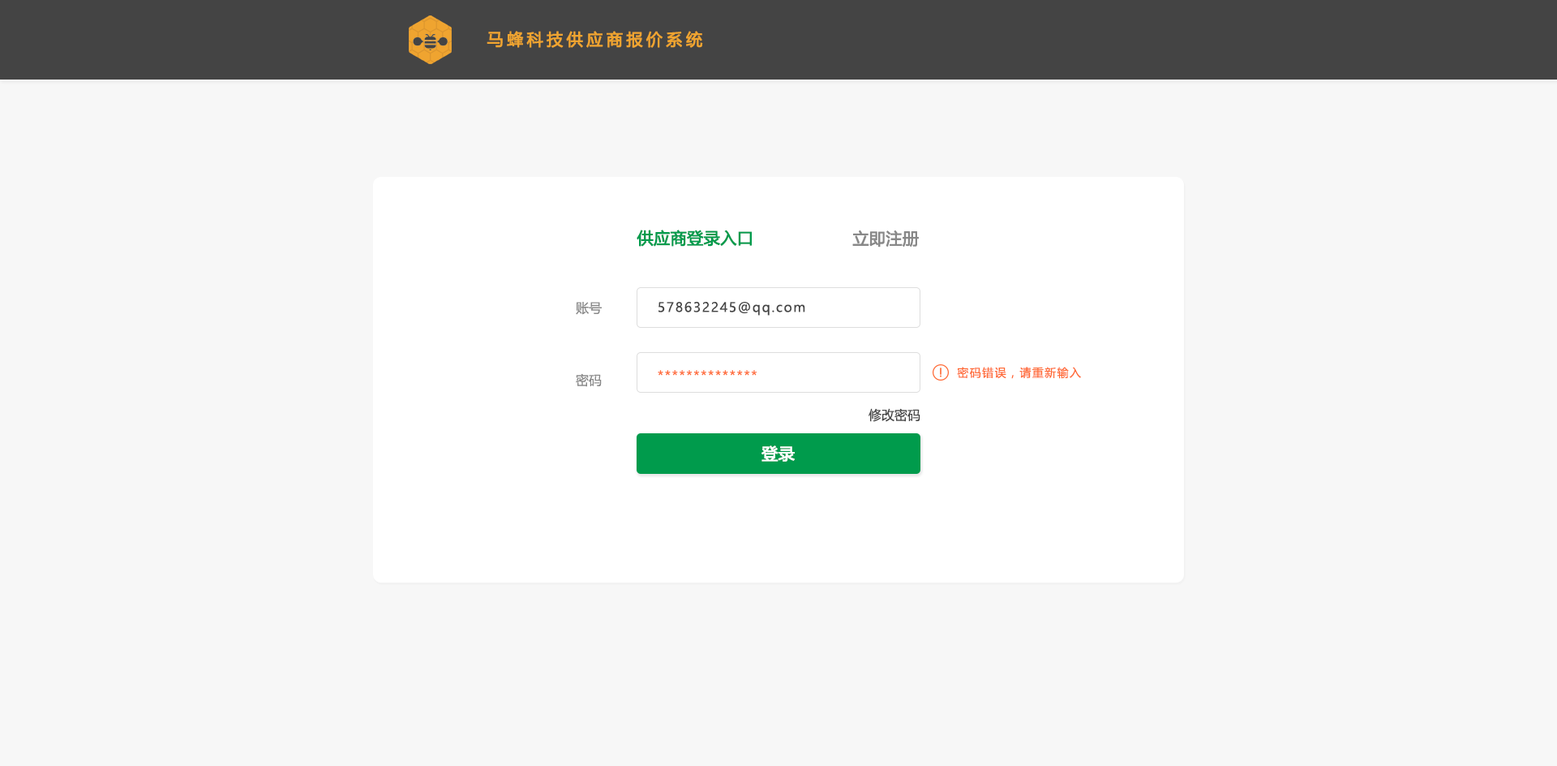
<style>
.page{position:relative;width:1557px;height:766px;background:#f7f7f7}
.page>*{position:absolute;margin:0}
.t1{font:16.2px "MicrosoftYaHei";letter-spacing:0.2em;color:#efa430;font-weight:bold}
.t2{font:16.2px "MicrosoftYaHei";color:#009b4c;font-weight:bold}
.t3{font:16.2px "MicrosoftYaHei";color:#888888;font-weight:bold}
.t4{font:13px "MicrosoftYaHei";color:#888888}
.t5{font:13px "MicrosoftYaHei";letter-spacing:0.1em;color:#444444}
.t6{font:13px "MicrosoftYaHei";letter-spacing:0.1em;color:#ff6934}
.t7{font:11.4px "MicrosoftYaHei";letter-spacing:0.1em;color:#ff6934}
.t8{font:13px "MicrosoftYaHei";color:#444444}
.t9{font:16.2px "MicrosoftYaHei";color:#ffffff;font-weight:bold}
</style>
<div class="page">
<p class="t1" style="left:487px;top:31px;width:216px;height:17px">马蜂科技供应商报价系统</p>
<p class="t2" style="left:637px;top:230px;width:115px;height:17px">供应商登录入口</p>
<p class="t3" style="left:852px;top:230px;width:67px;height:17px">立即注册</p>
<p class="t4" style="left:576px;top:302px;width:26px;height:13px">账号</p>
<p class="t5" style="left:659px;top:302px;width:146px;height:14px">578632245@qq.com</p>
<p class="t4" style="left:576px;top:373px;width:26px;height:14px">密码</p>
<p class="t6" style="left:658px;top:370px;width:99px;height:6px">**************</p>
<p class="t7" style="left:957px;top:367px;width:124px;height:12px">密码错误，请重新输入</p>
<p class="t8" style="left:869px;top:408px;width:52px;height:14px">修改密码</p>
<p class="t9" style="left:762px;top:445px;width:33px;height:17px">登录</p>
</div>
